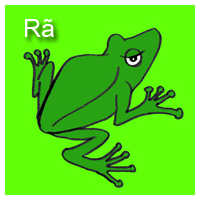
<style>
.page{position:relative;width:200px;height:200px;background:#61ff08}
.page>*{position:absolute;margin:0}
.t1{font:25px "ArialMT";color:#ffffff}
</style>
<div class="page">
<p class="t1" style="left:25px;top:19px;width:29px;height:18px">Rã</p>
</div>
